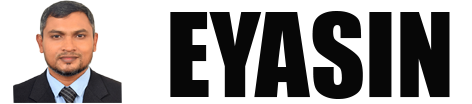
<style>
.page{position:relative;width:472px;height:104px;background:#ffffff}
.page>*{position:absolute;margin:0}
.t1{font:106.7px "Impact";color:#070707}
</style>
<div class="page">
<p class="t1" style="left:170px;top:11px;width:280px;height:88px">EYASIN</p>
</div>
